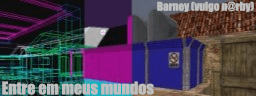
<style>
.page{position:relative;width:256px;height:96px}
.page>*{position:absolute;margin:0}
.t1{font:11.1px "Impact";color:#bebebe}
.t2{font:16px "Impact";color:#bebebe}
</style>
<div class="page">
<p class="t1" style="left:157px;top:1px;width:97px;height:11px">Barney (vulgo n@rby)</p>
<p class="t2" style="left:2px;top:81px;width:152px;height:14px">Entre em meus mundos</p>
</div>
